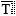
<style>
.page{position:relative;width:16px;height:16px;background:#ffffff}
.page>*{position:absolute;margin:0}
.t1{font:14px "TimesNewRomanPSMT";color:#000000}
</style>
<div class="page">
<p class="t1" style="left:1px;top:4px;width:9px;height:10px">T</p>
</div>
